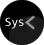
<style>
.page{position:relative;width:44px;height:45px;background:#010101}
.page>*{position:absolute;margin:0}
.t1{font:12px "Consolas";color:#ffffff}
.t2{font:24px "Consolas";color:#9b9a9a}
</style>
<div class="page">
<p class="t1" style="left:5px;top:17px;width:19px;height:12px">Sys</p>
<p class="t2" style="left:25px;top:15px;width:10px;height:15px;rotate:-180deg">&gt;</p>
</div>
